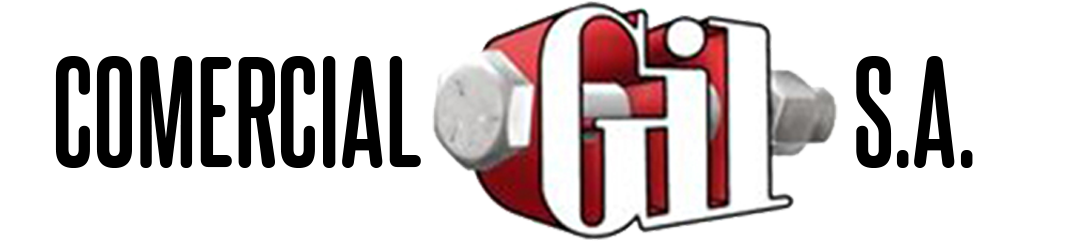
<style>
.page{position:relative;width:1080px;height:241px;background:#ffffff}
.page>*{position:absolute;margin:0}
.t1{font:133.3px "SteelfishRoundedRg-Bold";color:#000000}
</style>
<div class="page">
<p class="t1" style="left:55px;top:56px;width:918px;height:112px">COMERCIAL                        S.A.</p>
</div>
